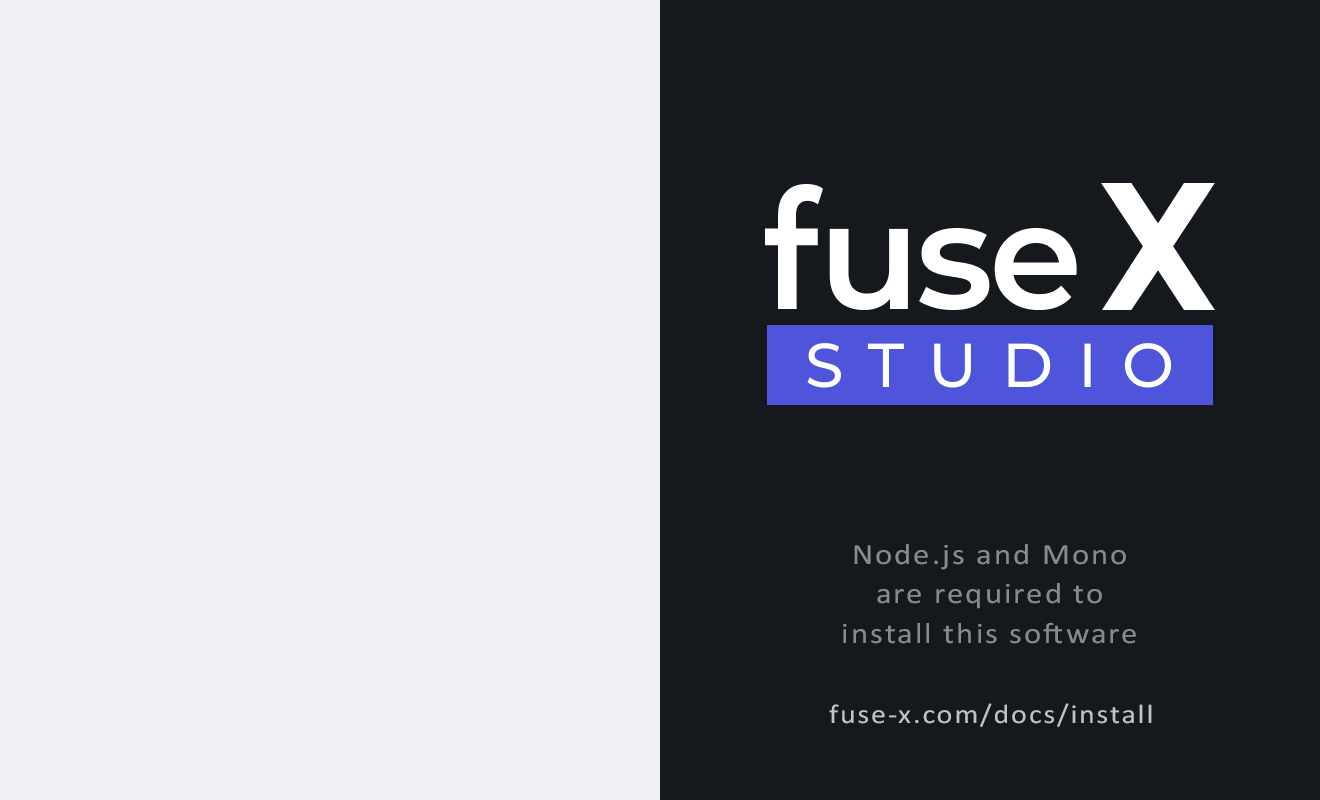
<style>
.page{position:relative;width:1320px;height:800px;background:#f0f0f5}
.page>*{position:absolute;margin:0}
.t1{font:29.5px "Calibri";letter-spacing:0.061em;color:#898a8e;scale:1.11 1}
.t2{font:27px "Calibri";letter-spacing:0.061em;color:#c1c1c6;scale:1.11 1}
</style>
<div class="page">
<p class="t1" style="left:843px;top:544px;width:293px;height:100px;text-align:center">Node.js and Mono<br>are required to<br>install this software</p>
<p class="t2" style="left:829px;top:703px;width:323px;height:24px">fuse-x.com/docs/install</p>
</div>
